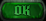
<style>
.page{position:relative;width:46px;height:21px}
.page>*{position:absolute;margin:0}
.t1{font:11.2px "MedievalTimes";color:#2aa035;scale:1.47 1}
</style>
<div class="page">
<p class="t1" style="left:14px;top:5px;width:17px;height:11px">OK</p>
</div>
